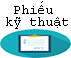
<style>
.page{position:relative;width:71px;height:58px;background:#ffffff}
.page>*{position:absolute;margin:0}
.t1{font:14px/12px "CourierNewPSMT";color:#000000}
</style>
<div class="page">
<p class="t1" style="left:6px;top:1px;width:62px;height:28px;text-align:center">Phiếu <br>kỹ thuật</p>
</div>
